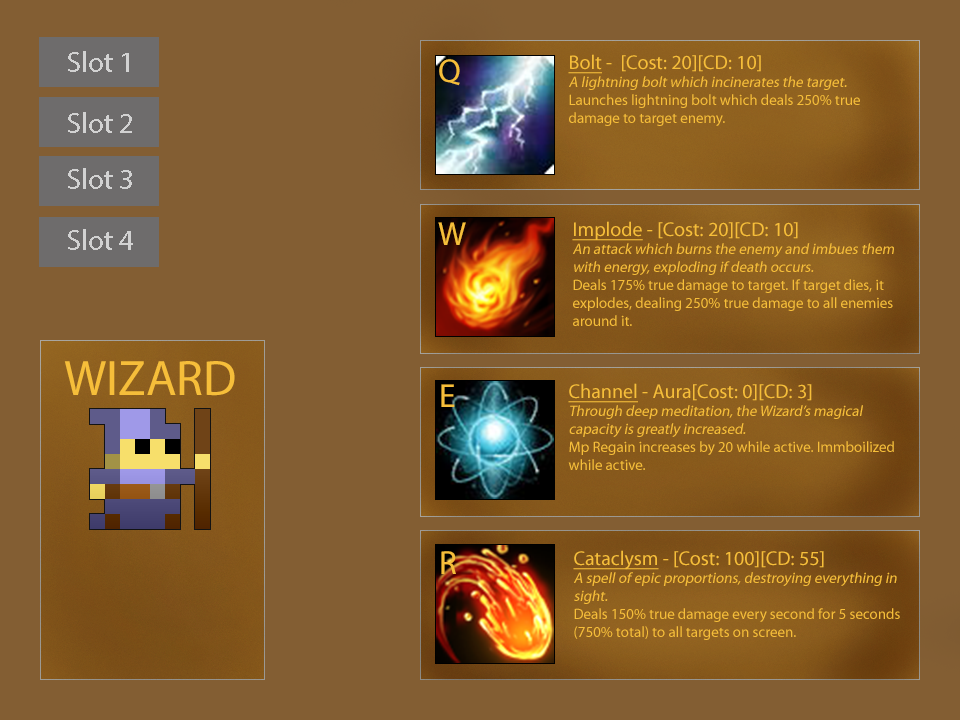
<style>
.page{position:relative;width:960px;height:720px;background:#835e33}
.page>*{position:absolute;margin:0}
.t1{font:29.2px "MyriadPro-Regular";color:#d2d2d2}
.t2{font:125px "MyriadPro-Regular";color:#ffffff}
.t3{font:15px "MyriadPro-Regular";color:#f6be3a}
.t4{font:20px "MyriadPro-Regular";color:#f6be3a;text-decoration:underline}
.t5{font:20px "MyriadPro-Regular";color:#f6be3a}
.t6{font:15px "MyriadPro-Regular";color:#f6be3a;font-style:italic}
.t7{font:33.2px "MyriadPro-Regular";color:#f6be3a}
.t8{font:50px "MyriadPro-Regular";color:#f6be3a}
</style>
<div class="page">
<p class="t1" style="left:68px;top:51px;width:61px;height:21px;text-align:center">Slot 1<br><span class="t2">hERO</span></p>
<p class="t3" style="left:568px;top:54px;width:292px;height:72px"><span class="t4">Bolt</span><span class="t5"> -  [Cost: 20][CD: 10]<br></span><span class="t6">A lightning bolt which incinerates the target.<br></span>Launches lightning bolt which deals 250% true damage to target enemy.</p>
<p class="t7" style="left:439px;top:59px;width:21px;height:27px">Q</p>
<p class="t1" style="left:68px;top:112px;width:64px;height:21px;text-align:center">Slot 2<br><span class="t2">hERO</span></p>
<p class="t1" style="left:68px;top:168px;width:64px;height:21px;text-align:center">Slot 3<br><span class="t2">hERO</span></p>
<p class="t7" style="left:438px;top:222px;width:28px;height:23px">W</p>
<p class="t3" style="left:572px;top:221px;width:322px;height:105px"><span class="t4">Implode</span><span class="t5"> - [Cost: 20][CD: 10]<br></span><span class="t6">An attack which burns the enemy and imbues them with energy, exploding if death occurs.<br></span>Deals 175% true damage to target. If target dies, it explodes, dealing 250% true damage to all enemies around it.</p>
<p class="t1" style="left:68px;top:229px;width:65px;height:21px;text-align:center">Slot 4<br><span class="t2">hERO</span></p>
<p class="t8" style="left:64px;top:361px;width:171px;height:35px">WIZARD</p>
<p class="t7" style="left:441px;top:384px;width:14px;height:23px">E</p>
<p class="t6" style="left:568px;top:383px;width:326px;height:87px"><span class="t4">Channel</span><span class="t5"> - Aura[Cost: 0][CD: 3]<br></span>Through deep meditation, the Wizard’s magical capacity is greatly increased.<br><span class="t3">Mp Regain increases by 20 while active. Immboilized while active.</span></p>
<p class="t7" style="left:441px;top:551px;width:15px;height:23px">R</p>
<p class="t3" style="left:573px;top:550px;width:327px;height:90px"><span class="t4">Cataclysm</span><span class="t5"> - [Cost: 100][CD: 55]<br></span><span class="t6">A spell of epic proportions, destroying everything in sight.<br></span>Deals 150% true damage every second for 5 seconds (750% total) to all targets on screen.</p>
</div>
